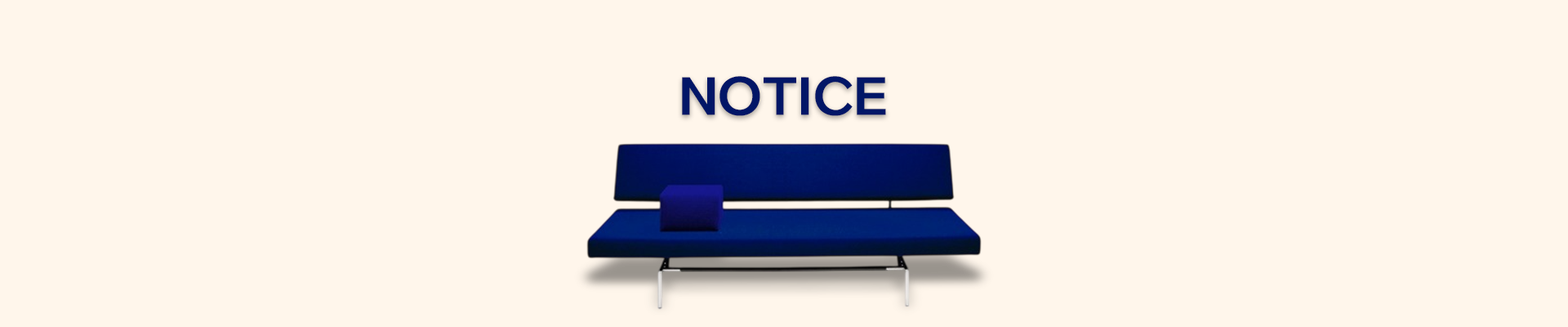
<style>
.page{position:relative;width:1568px;height:327px;background:#fff6eb}
.page>*{position:absolute;margin:0}
.t1{font:47.6px "SBAggroM";color:#011667}
</style>
<div class="page">
<p class="t1" style="left:682px;top:76px;width:204px;height:40px">NOTICE</p>
</div>
